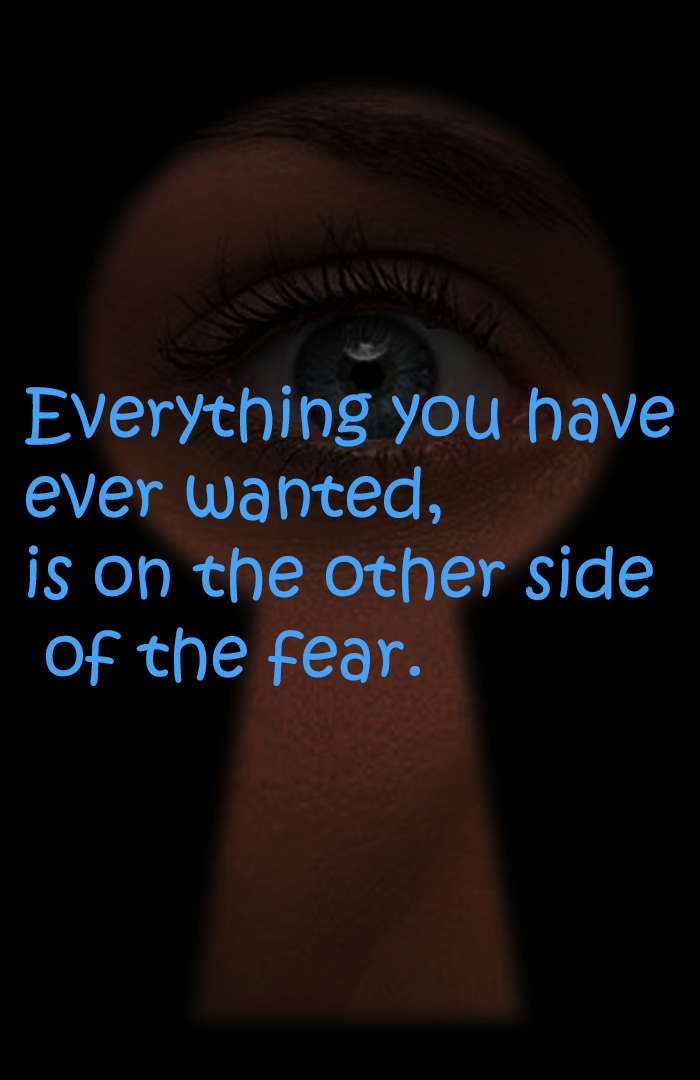
<style>
.page{position:relative;width:700px;height:1080px;background:#000000}
.page>*{position:absolute;margin:0}
.t1{font:66.6px "KristenITC-Regular";color:#46a2f7}
</style>
<div class="page">
<p class="t1" style="left:25px;top:385px;width:649px;height:301px">Everything you have<br>ever wanted,<br>is on the other side<br> of the fear.</p>
</div>
